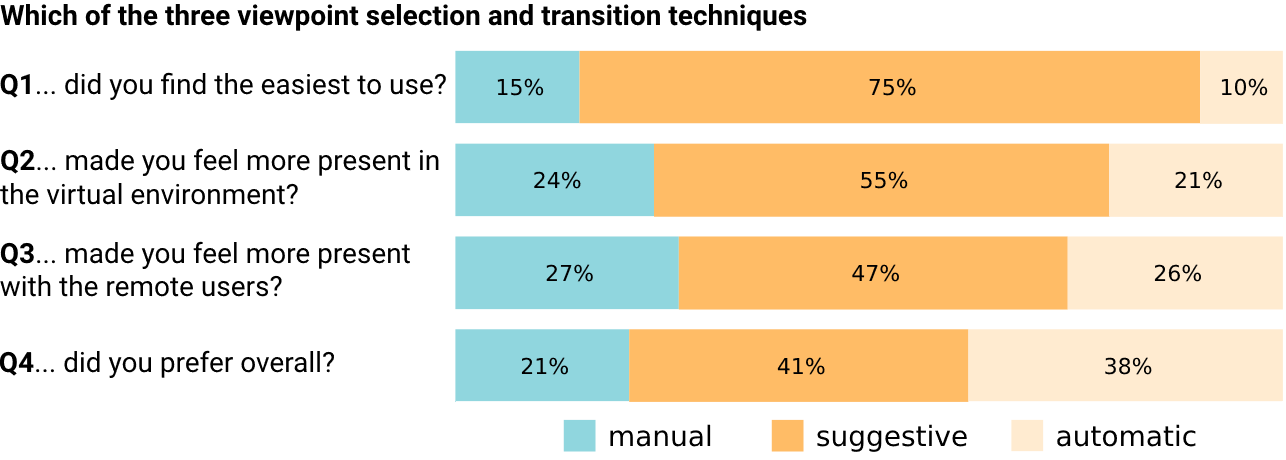
<style>
.page{position:relative;width:1286px;height:460px;background:#ffffff}
.page>*{position:absolute;margin:0}
.t1{font:28px "Roboto-Bold";color:#000000}
.t2{font:28px "Roboto-Regular";color:#000000}
.t3{font:22px "Helvetica";color:#000000}
.t4{font:28px "Helvetica";color:#000000}
</style>
<div class="page">
<p class="t1" style="left:0px;top:3px;width:807px;height:28px">Which of the three viewpoint selection and transition techniques</p>
<p class="t2" style="left:0px;top:72px;width:446px;height:28px"><span class="t1">Q1</span>... did you find the easiest to use?</p>
<p class="t3" style="left:497px;top:78px;width:47px;height:18px">15%</p>
<p class="t3" style="left:869px;top:78px;width:47px;height:18px">75%</p>
<p class="t3" style="left:1221px;top:78px;width:47px;height:18px">10%</p>
<p class="t2" style="left:0px;top:148px;width:439px;height:57px"><span class="t1">Q2</span>... made you feel more present in <br>the virtual environment?</p>
<p class="t3" style="left:534px;top:171px;width:47px;height:18px">24%</p>
<p class="t3" style="left:861px;top:171px;width:47px;height:18px">55%</p>
<p class="t3" style="left:1175px;top:171px;width:47px;height:18px">21%</p>
<p class="t2" style="left:0px;top:241px;width:410px;height:56px"><span class="t1">Q3</span>... made you feel more present <br>with the remote users?</p>
<p class="t3" style="left:546px;top:264px;width:47px;height:18px">27%</p>
<p class="t3" style="left:852px;top:264px;width:47px;height:18px">47%</p>
<p class="t3" style="left:1154px;top:264px;width:47px;height:18px">26%</p>
<p class="t2" style="left:0px;top:350px;width:334px;height:28px"><span class="t1">Q4</span>... did you prefer overall?</p>
<p class="t3" style="left:521px;top:357px;width:47px;height:18px">21%</p>
<p class="t3" style="left:777px;top:357px;width:48px;height:18px">41%</p>
<p class="t3" style="left:1105px;top:357px;width:47px;height:18px">38%</p>
<p class="t4" style="left:610px;top:424px;width:101px;height:23px">manual</p>
<p class="t4" style="left:817px;top:424px;width:150px;height:28px">suggestive</p>
<p class="t4" style="left:1057px;top:424px;width:139px;height:23px">automatic</p>
</div>
